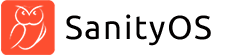
<style>
.page{position:relative;width:227px;height:55px;background:#ffffff}
.page>*{position:absolute;margin:0}
.t1{font:33.3px "Ubuntu";letter-spacing:0.045em;color:#020000}
</style>
<div class="page">
<p class="t1" style="left:66px;top:14px;width:145px;height:32px">SanityOS</p>
</div>
